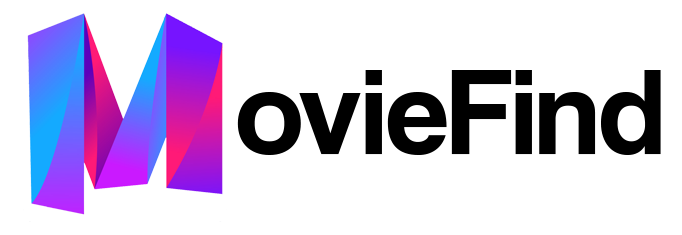
<style>
.page{position:relative;width:682px;height:235px;background:#ffffff}
.page>*{position:absolute;margin:0}
.t1{font:125px "CoolveticaRg-Regular";color:#000000}
</style>
<div class="page">
<p class="t1" style="left:237px;top:70px;width:424px;height:85px">ovieFind</p>
</div>
